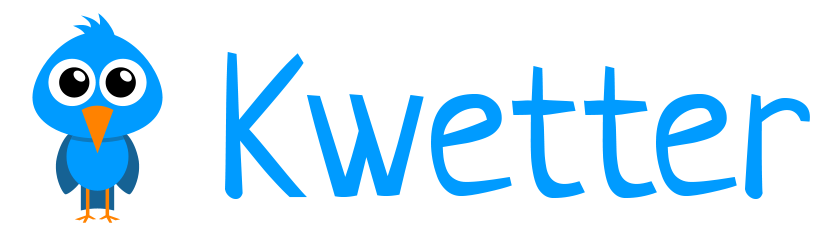
<style>
.page{position:relative;width:840px;height:240px;background:#ffffff}
.page>*{position:absolute;margin:0}
.t1{font:200px "Neucha";color:#009bff}
</style>
<div class="page">
<p class="t1" style="left:225px;top:52px;width:585px;height:147px">Kwetter</p>
</div>
